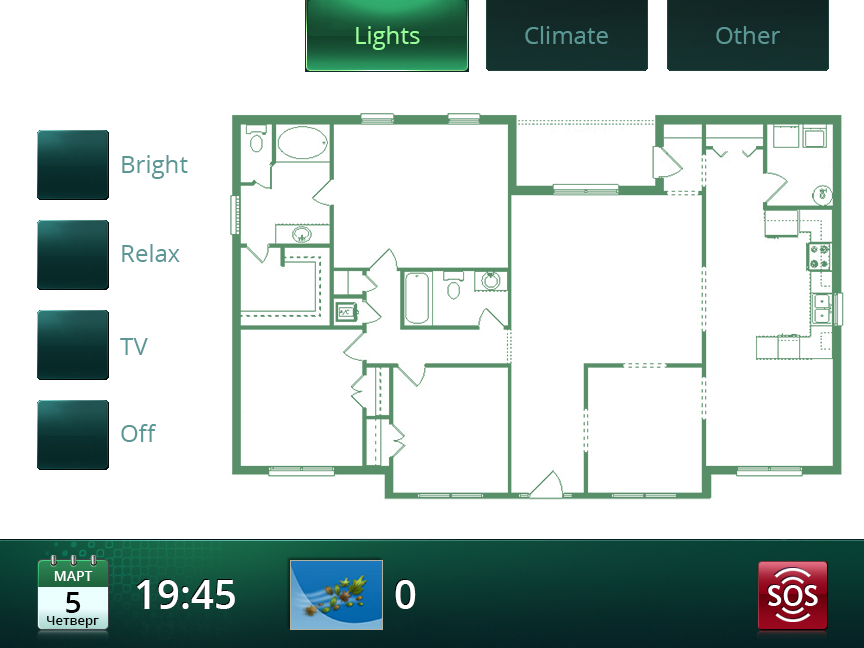
<style>
.page{position:relative;width:864px;height:648px;background:#ffffff}
.page>*{position:absolute;margin:0}
.t1{font:24px "OpenSans";color:#99ff99}
.t2{font:24px "OpenSans";color:#5b9795}
.t3{font:14px "OpenSans-SemiBold";color:#ffffff}
.t4{font:40px "OpenSans-SemiBold";color:#ffffff}
.t5{font:30px "OpenSans-SemiBold";color:#010101}
.t6{font:13px "OpenSans-SemiBold";color:#010101}
</style>
<div class="page">
<p class="t1" style="left:356px;top:26px;width:64px;height:24px">Lights</p>
<p class="t1" style="left:356px;top:26px;width:64px;height:24px">Lights</p>
<p class="t2" style="left:525px;top:26px;width:83px;height:18px">Climate</p>
<p class="t2" style="left:716px;top:26px;width:64px;height:18px">Other</p>
<p class="t2" style="left:122px;top:155px;width:66px;height:24px">Bright</p>
<p class="t2" style="left:122px;top:244px;width:58px;height:18px">Relax</p>
<p class="t2" style="left:120px;top:338px;width:28px;height:17px">TV</p>
<p class="t2" style="left:121px;top:424px;width:35px;height:18px">Off</p>
<p class="t3" style="left:54px;top:571px;width:39px;height:10px">МАРТ</p>
<p class="t4" style="left:136px;top:579px;width:98px;height:29px">19:45</p>
<p class="t4" style="left:137px;top:580px;width:98px;height:29px">19:45</p>
<p class="t4" style="left:394px;top:579px;width:21px;height:29px">0</p>
<p class="t4" style="left:395px;top:580px;width:21px;height:29px">0</p>
<p class="t5" style="left:66px;top:592px;width:15px;height:21px">5</p>
<p class="t6" style="left:47px;top:616px;width:52px;height:12px">Четверг</p>
</div>
